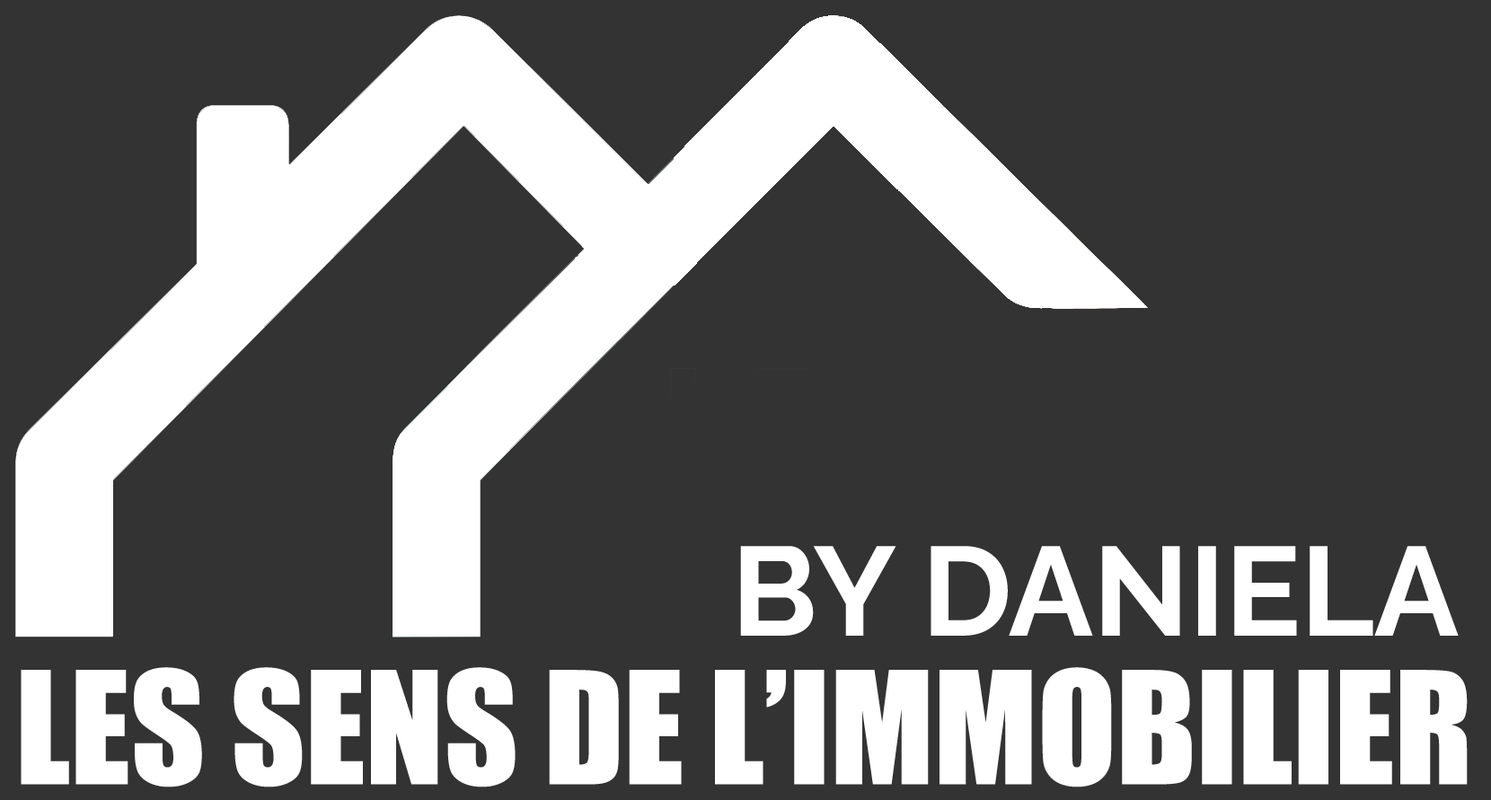
<style>
.page{position:relative;width:1491px;height:800px;background:#333333}
.page>*{position:absolute;margin:0}
.t1{font:125.8px "Raleway-Bold";color:#ffffff;text-transform:uppercase}
.t2{font:144.5px "Impact";color:#ffffff;text-transform:uppercase}
</style>
<div class="page">
<p class="t1" style="left:740px;top:546px;width:718px;height:90px">By DANIELA</p>
<p class="t2" style="left:21px;top:667px;width:1446px;height:120px">LES SENS DE L’Immobilier</p>
</div>
